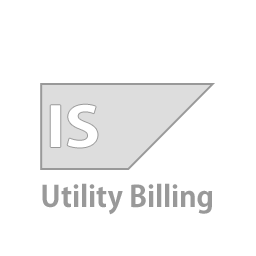
<style>
.page{position:relative;width:256px;height:256px;background:#ffffff}
.page>*{position:absolute;margin:0}
.t1{font:54.2px "AdobeGothicStd-Bold";color:#ffffff;scale:1.18 1}
.t2{font:28.8px "AdobeGothicStd-Bold";color:#999999}
</style>
<div class="page">
<p class="t1" style="left:50px;top:104px;width:48px;height:44px">IS</p>
<p class="t2" style="left:42px;top:183px;width:171px;height:32px">Utility Billing</p>
</div>
